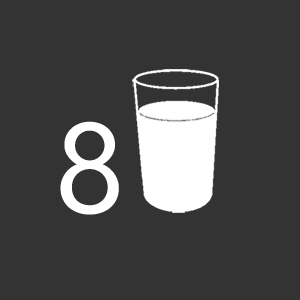
<style>
.page{position:relative;width:300px;height:300px;background:#333333}
.page>*{position:absolute;margin:0}
.t1{font:128px "SegoeUISymbol";color:#ffffff}
</style>
<div class="page">
<p class="t1" style="left:60px;top:121px;width:59px;height:94px">8</p>
</div>
